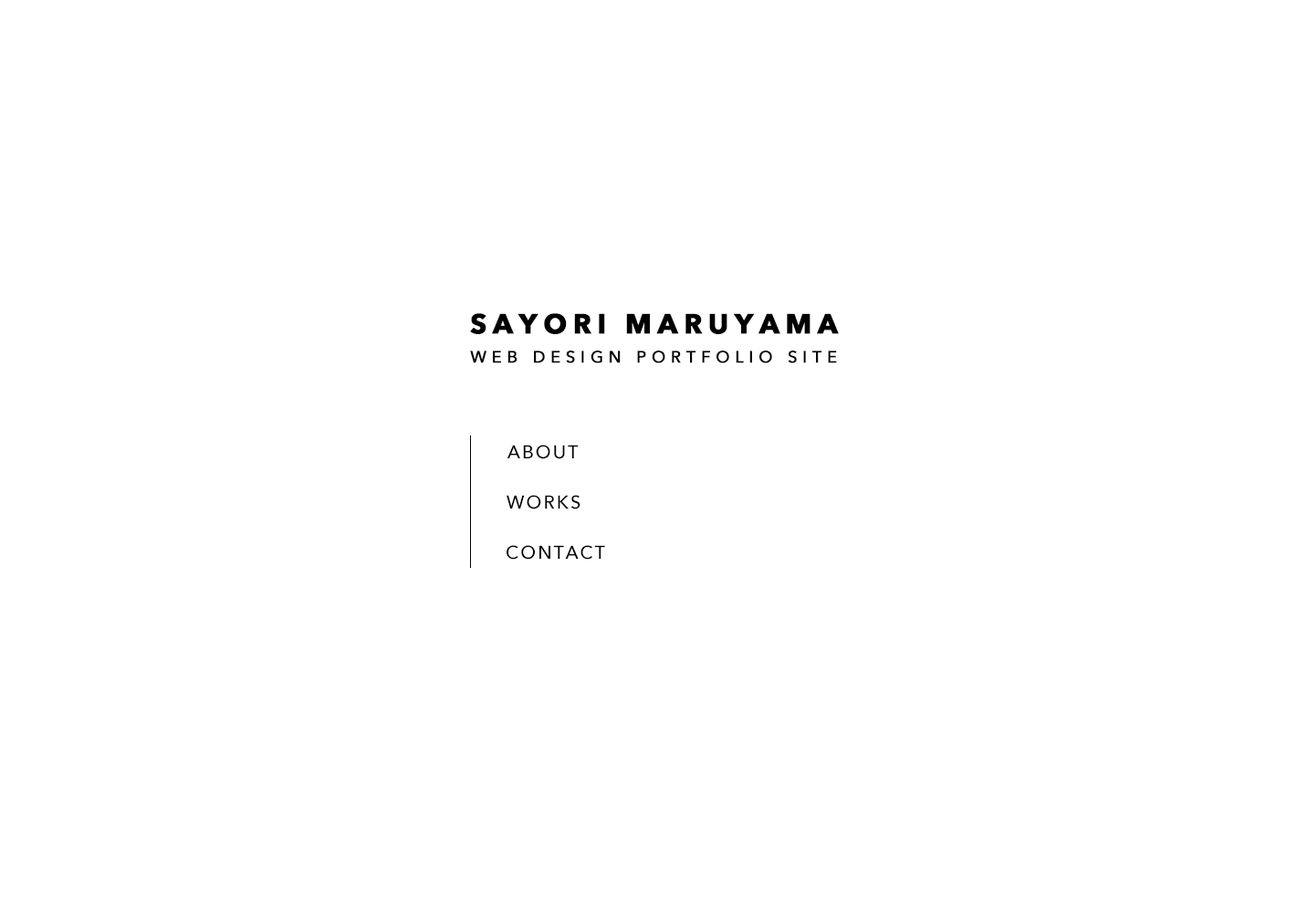
<style>
.page{position:relative;width:1307px;height:913px;background:#ffffff}
.page>*{position:absolute;margin:0}
.t1{font:16.4px/29.2px "AvenirNext-Medium";letter-spacing:0.3em;color:#000000;font-weight:bold}
.t2{font:27.4px/43.8px "AvenirNext-Bold";letter-spacing:0.2em;color:#000000;font-weight:bold}
.t3{font:18.3px "AvenirNext-Medium";letter-spacing:0.1em;color:#000000}
</style>
<div class="page">
<p class="t1" style="left:470px;top:313px;width:369px;height:50px"><span class="t2">SAYORI MARUYAMA<br></span>WEB DESIGN PORTFOLIO SITE</p>
<p class="t3" style="left:506px;top:444px;width:73px;height:15px">ABOUT</p>
<p class="t3" style="left:506px;top:495px;width:74px;height:14px">WORKS</p>
<p class="t3" style="left:506px;top:545px;width:99px;height:14px">CONTACT</p>
</div>
